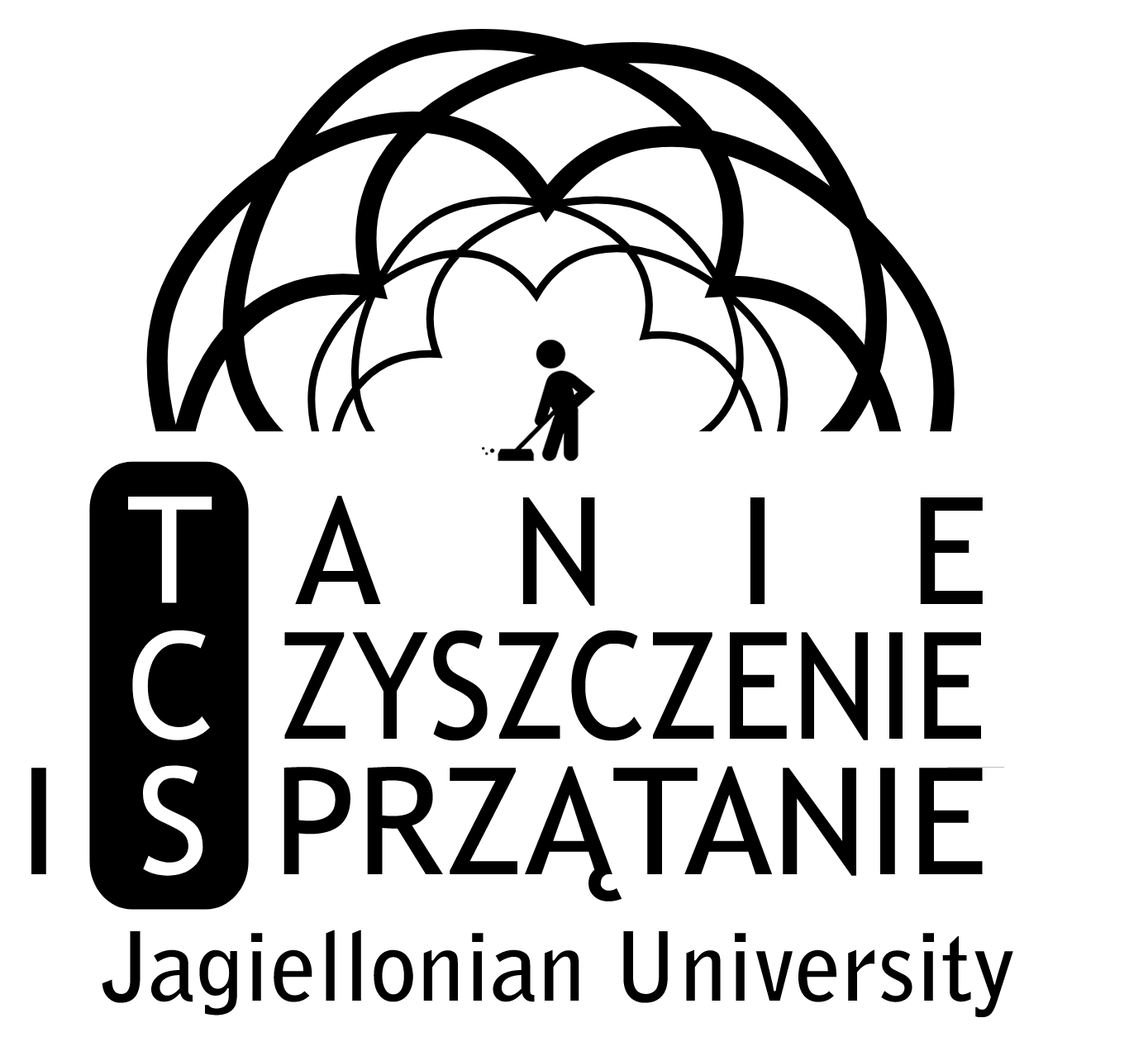
<style>
.page{position:relative;width:1129px;height:1056px;background:#ffffff}
.page>*{position:absolute;margin:0}
.t1{font:148.8px "TrebuchetMS";color:#000000}
.t2{font:148.8px "TrebuchetMS";color:#000000;scale:0.9 1}
</style>
<div class="page">
<p class="t1" style="left:295px;top:496px;width:688px;height:110px">A   N   I   E</p>
<p class="t2" style="left:284px;top:631px;width:697px;height:110px">ZYSZCZENIE</p>
<p class="t1" style="left:31px;top:768px;width:15px;height:106px">I</p>
<p class="t1" style="left:283px;top:766px;width:700px;height:136px">PRZĄTANIE</p>
</div>
